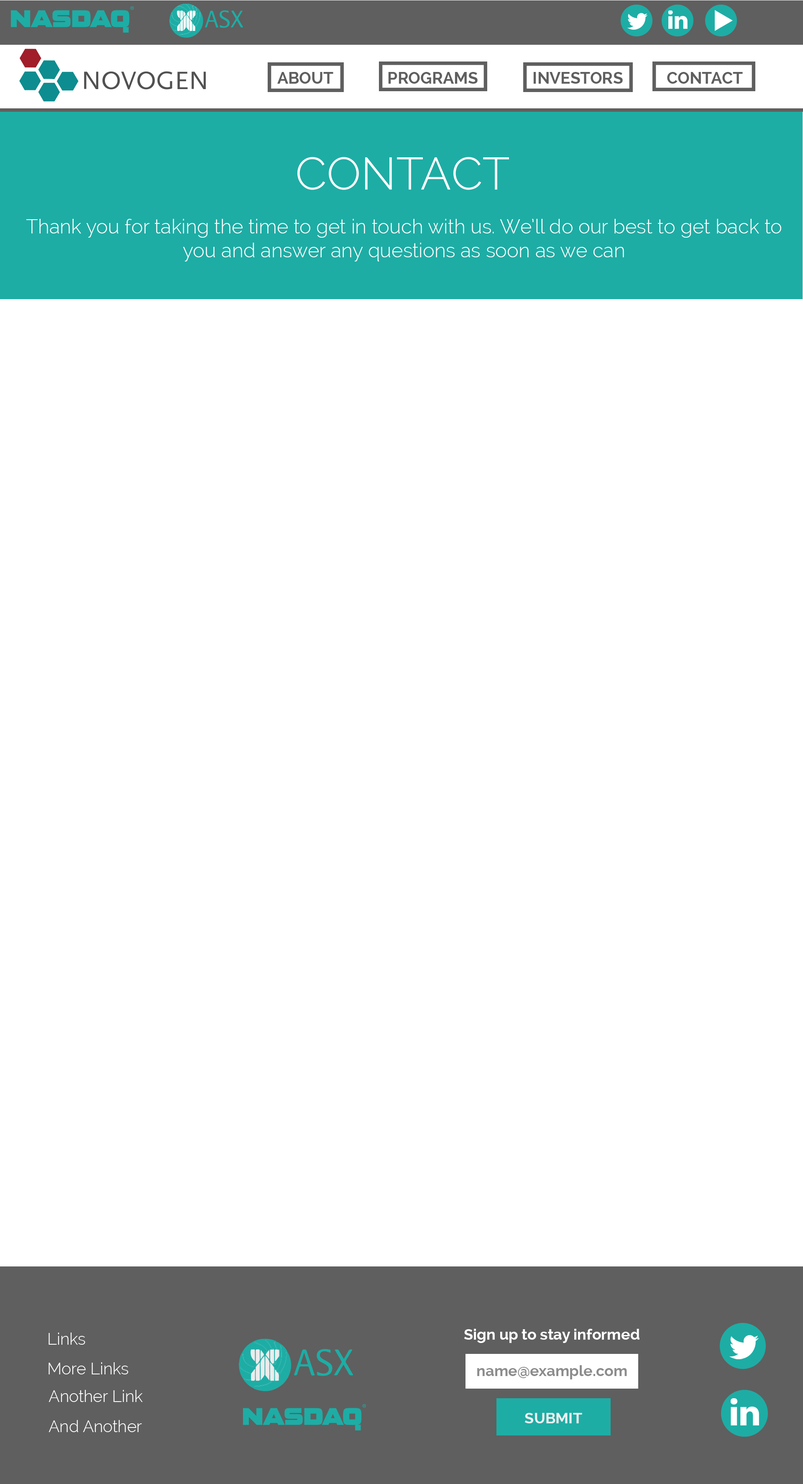
<style>
.page{position:relative;width:803px;height:1484px;background:#ffffff}
.page>*{position:absolute;margin:0}
.t1{font:16.3px "Raleway-Bold";color:#5f5f5f}
.t2{font:45.3px "Raleway-Light";color:#ffffff;text-transform:uppercase}
.t3{font:19.8px "Raleway-Light";color:#ffffff}
.t4{font:16.3px "Raleway-Light";color:#ffffff}
.t5{font:15.1px "Raleway-Bold";color:#ffffff}
.t6{font:15.1px "Raleway-Bold";color:#8c8c8c}
.t7{font:15.1px "Raleway-Bold";color:#efefef}
</style>
<div class="page">
<p class="t1" style="left:277px;top:72px;width:56px;height:12px">ABOUT</p>
<p class="t1" style="left:388px;top:72px;width:90px;height:12px">PROGRAMS</p>
<p class="t1" style="left:388px;top:72px;width:90px;height:12px">PROGRAMS</p>
<p class="t1" style="left:534px;top:72px;width:89px;height:12px">INVESTORS</p>
<p class="t1" style="left:667px;top:72px;width:76px;height:12px">CONTACT</p>
<p class="t2" style="left:298px;top:157px;width:211px;height:33px">Contact</p>
<p class="t3" style="left:26px;top:219px;width:756px;height:43px;text-align:center">Thank you for taking the time to get in touch with us. We’ll do our best to get back to you and answer any questions as soon as we can</p>
<p class="t4" style="left:49px;top:1333px;width:36px;height:12px">Links</p>
<p class="t5" style="left:464px;top:1329px;width:176px;height:14px">Sign up to stay informed</p>
<p class="t4" style="left:49px;top:1362px;width:79px;height:13px">More Links</p>
<p class="t6" style="left:477px;top:1365px;width:150px;height:15px">name@example.com</p>
<p class="t4" style="left:49px;top:1390px;width:94px;height:12px">Another Link</p>
<p class="t4" style="left:49px;top:1420px;width:93px;height:12px">And Another</p>
<p class="t7" style="left:525px;top:1413px;width:57px;height:11px">SUBMIT</p>
</div>
